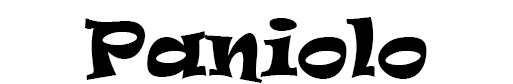
<style>
.page{position:relative;width:513px;height:84px;background:#ffffff}
.page>*{position:absolute;margin:0}
.t1{font:72px "Ravie";color:#000000}
</style>
<div class="page">
<p class="t1" style="left:85px;top:17px;width:342px;height:66px">Paniolo</p>
</div>
